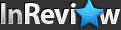
<style>
.page{position:relative;width:121px;height:30px;background:#333333}
.page>*{position:absolute;margin:0}
.t1{font:30px "MyriadPro-Bold";letter-spacing:-0.025em}
.t2{font:30px "MyriadPro-Bold";letter-spacing:-0.025em;color:#ffffff}
</style>
<div class="page">
<p class="t1" style="left:1px;top:3px;width:21px;height:21px">In</p>
<p class="t2" style="left:25px;top:3px;width:96px;height:21px">Revi    w</p>
</div>
